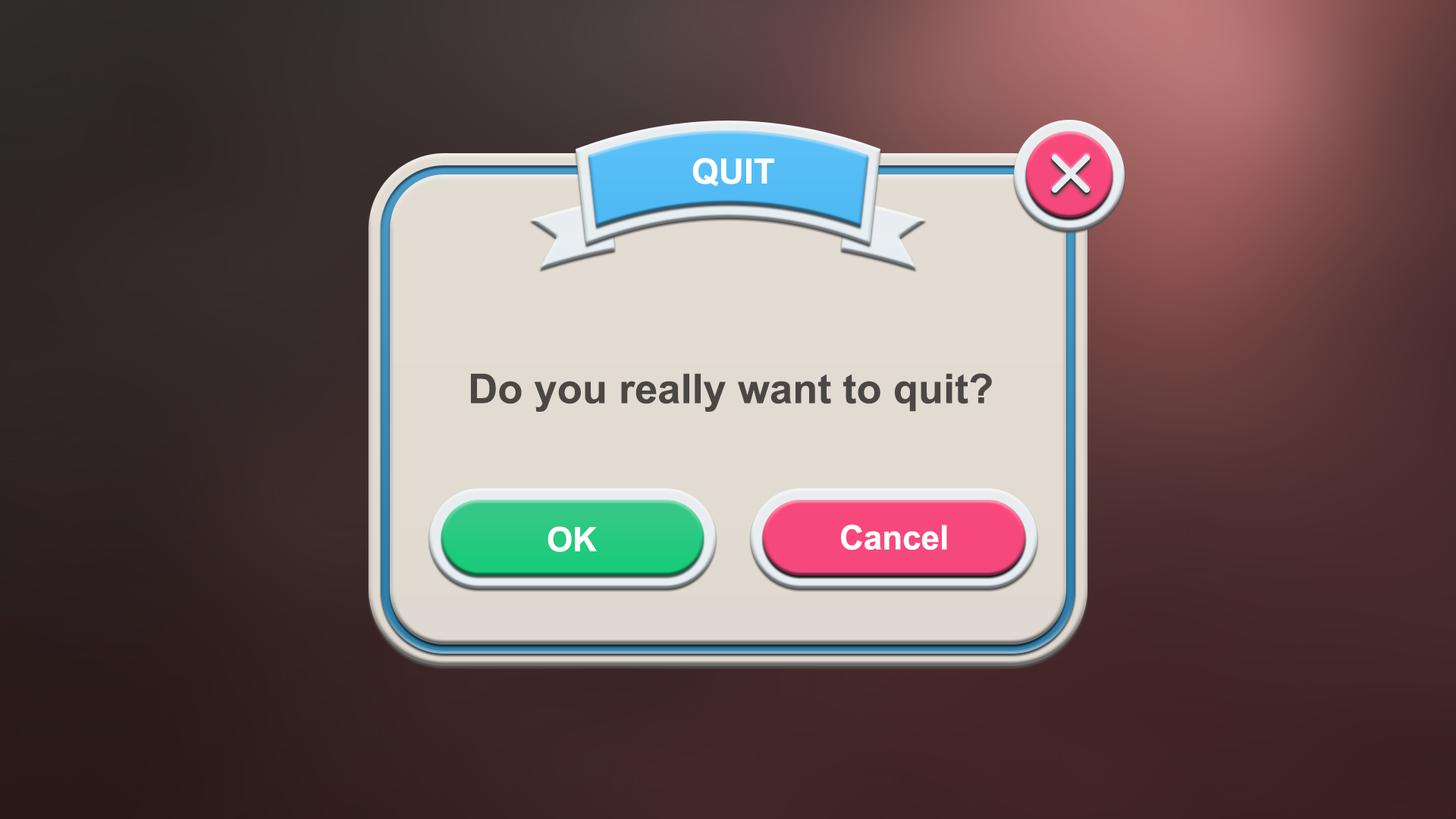
<style>
.page{position:relative;width:1456px;height:819px}
.page>*{position:absolute;margin:0}
.t1{font:34.9px "Arial-BoldMT";color:#ffffff}
.t2{font:40.9px "Arial-BoldMT";color:#4a4744}
.t3{font:33.8px "Arial-BoldMT";color:#ffffff}
</style>
<div class="page">
<p class="t1" style="left:692px;top:158px;width:82px;height:29px">QUIT</p>
<p class="t2" style="left:471px;top:373px;width:521px;height:39px">Do you really want to quit?</p>
<p class="t3" style="left:548px;top:526px;width:49px;height:26px">OK</p>
<p class="t3" style="left:841px;top:524px;width:106px;height:27px">Cancel</p>
</div>
